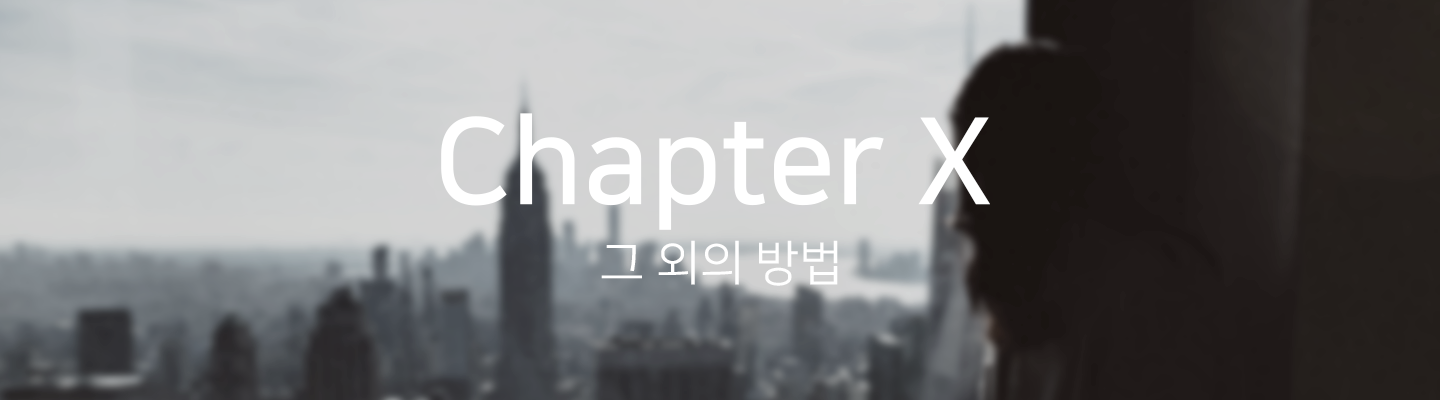
<style>
.page{position:relative;width:1440px;height:400px}
.page>*{position:absolute;margin:0}
.t1{font:120px "NanumSquareB";color:#ffffff}
.t2{font:48px "NanumSquareR";color:#ffffff}
</style>
<div class="page">
<p class="t1" style="left:441px;top:113px;width:549px;height:117px">Chapter X</p>
<p class="t2" style="left:601px;top:240px;width:237px;height:46px">그 외의 방법</p>
</div>
